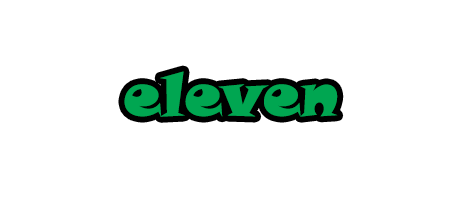
<style>
.page{position:relative;width:462px;height:199px;background:#ffffff}
.page>*{position:absolute;margin:0}
.t1{font:60px "SnapITC-Regular";color:#00a651}
</style>
<div class="page">
<p class="t1" style="left:124px;top:71px;width:214px;height:46px">eleven</p>
</div>
